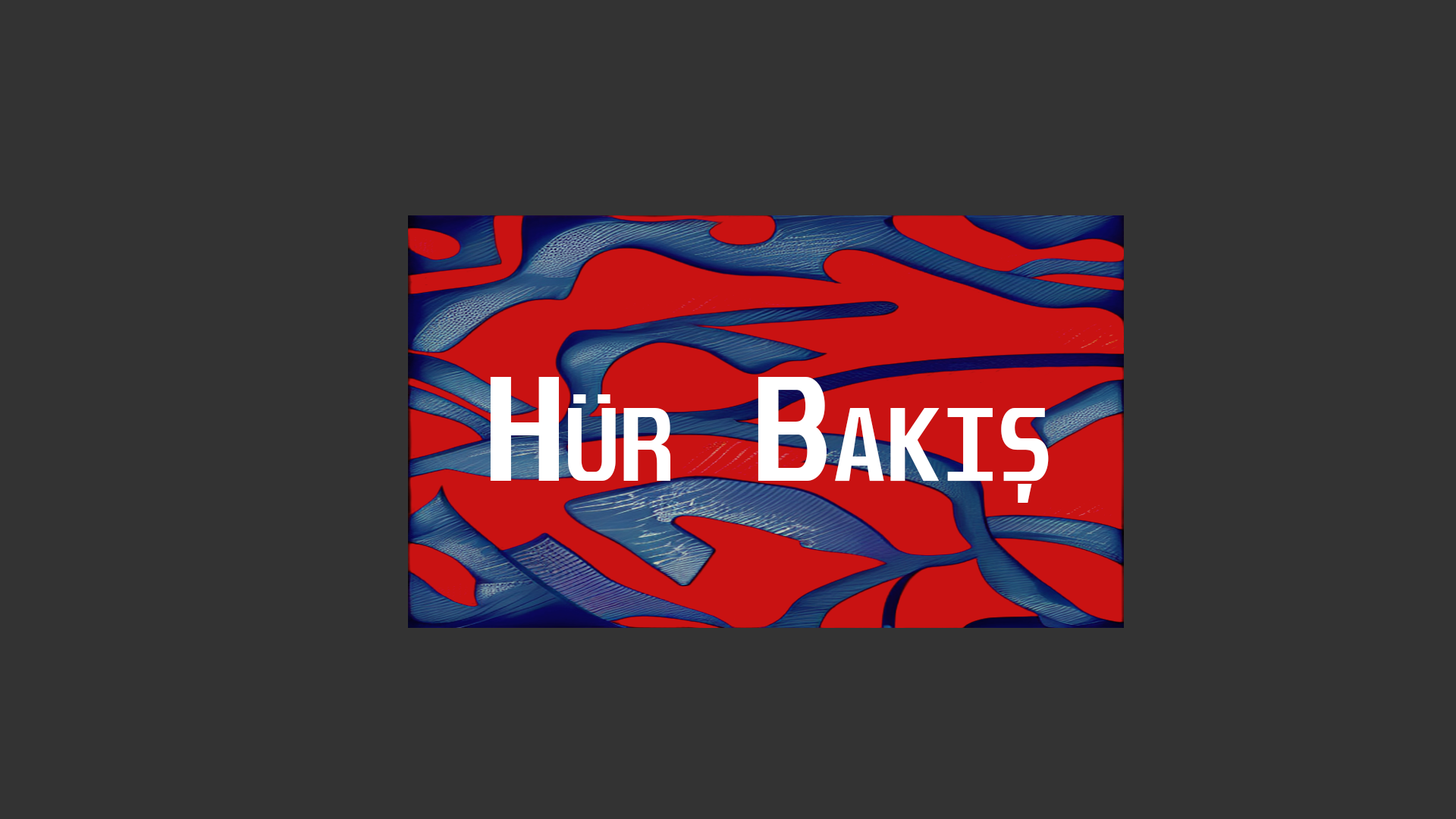
<style>
.page{position:relative;width:1456px;height:819px;background:#333333}
.page>*{position:absolute;margin:0}
.t1{font:128.9px "Unispace-Bold";color:#ffffff;font-variant:small-caps}
</style>
<div class="page">
<p class="t1" style="left:490px;top:377px;width:559px;height:126px">Hür Bakış</p>
</div>
